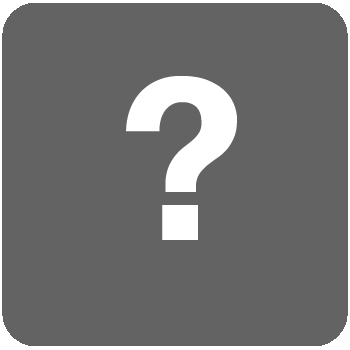
<style>
.page{position:relative;width:350px;height:350px;background:#636363}
.page>*{position:absolute;margin:0}
.t1{font:225px "HelveticaNeue-Bold";color:#ffffff}
</style>
<div class="page">
<p class="t1" style="left:126px;top:76px;width:111px;height:164px">?</p>
</div>
